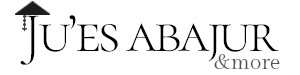
<style>
.page{position:relative;width:300px;height:75px;background:#ffffff}
.page>*{position:absolute;margin:0}
.t1{font:56.4px "CormorantGaramond-Light";letter-spacing:-0.06em;color:#000000;font-variant:small-caps}
.t2{font:21.4px "GildaDisplay-Regular";color:#545454}
</style>
<div class="page">
<p class="t1" style="left:20px;top:15px;width:259px;height:50px">Ju’es abajur</p>
<p class="t2" style="left:214px;top:54px;width:66px;height:15px">&amp;more</p>
</div>
